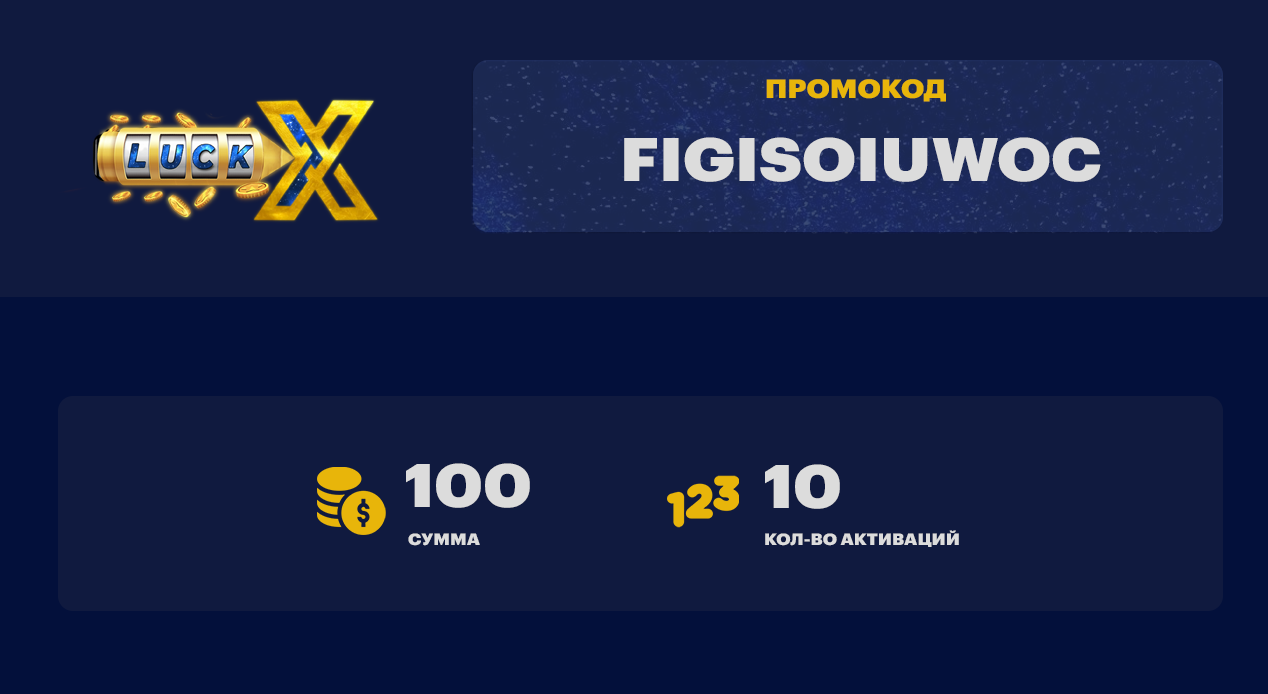
<style>
.page{position:relative;width:1268px;height:694px;background:#101a3f}
.page>*{position:absolute;margin:0}
.t1{font:26px "GraphikLCG-Black";color:#e8b50a;scale:1.1 1}
.t2{font:60px "GraphikLCG-Black";color:#dcdcdc;scale:1.1 1}
.t3{font:16px "GraphikLCG-Black";color:#dcdcdc;scale:1.1 1}
</style>
<div class="page">
<p class="t1" style="left:766px;top:79px;width:180px;height:23px">ПРОМОКОД</p>
<p class="t2" style="left:624px;top:137px;width:477px;height:45px">FIGISOIUWOC</p>
<p class="t2" style="left:406px;top:463px;width:124px;height:45px">100</p>
<p class="t2" style="left:765px;top:464px;width:75px;height:45px">10</p>
<p class="t3" style="left:408px;top:533px;width:72px;height:13px">СУММА</p>
<p class="t3" style="left:765px;top:530px;width:194px;height:17px">КОЛ-ВО АКТИВАЦИЙ</p>
</div>
